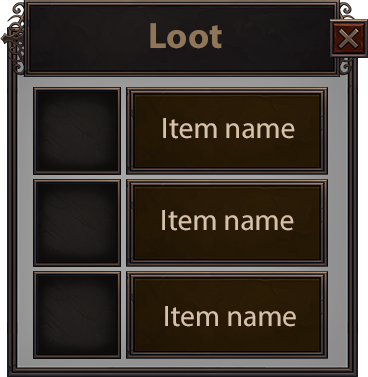
<style>
.page{position:relative;width:368px;height:377px}
.page>*{position:absolute;margin:0}
.t1{font:36.6px "MyriadPro-Bold";color:#907659}
.t2{font:29.8px "MyriadPro-Regular";color:#d7c1a9}
</style>
<div class="page">
<p class="t1" style="left:150px;top:23px;width:72px;height:26px">Loot</p>
<p class="t2" style="left:163px;top:118px;width:132px;height:21px">Item name</p>
<p class="t2" style="left:162px;top:210px;width:132px;height:21px">Item name</p>
<p class="t2" style="left:165px;top:306px;width:131px;height:21px">Item name</p>
</div>
